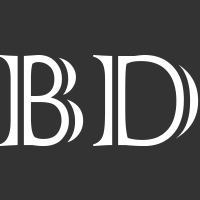
<style>
.page{position:relative;width:200px;height:200px;background:#333333}
.page>*{position:absolute;margin:0}
.t1{font:173.4px "ColonnaMT";color:#ffffff}
</style>
<div class="page">
<p class="t1" style="left:0px;top:55px;width:199px;height:91px">BD</p>
</div>
